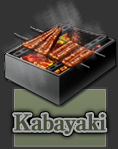
<style>
.page{position:relative;width:118px;height:149px;background:#333333}
.page>*{position:absolute;margin:0}
.t1{font:22px "RyuminPro-ExBold";letter-spacing:-0.08em;color:#424c37;font-weight:bold}
</style>
<div class="page">
<p class="t1" style="left:14px;top:114px;width:92px;height:20px">Kabayaki</p>
</div>
